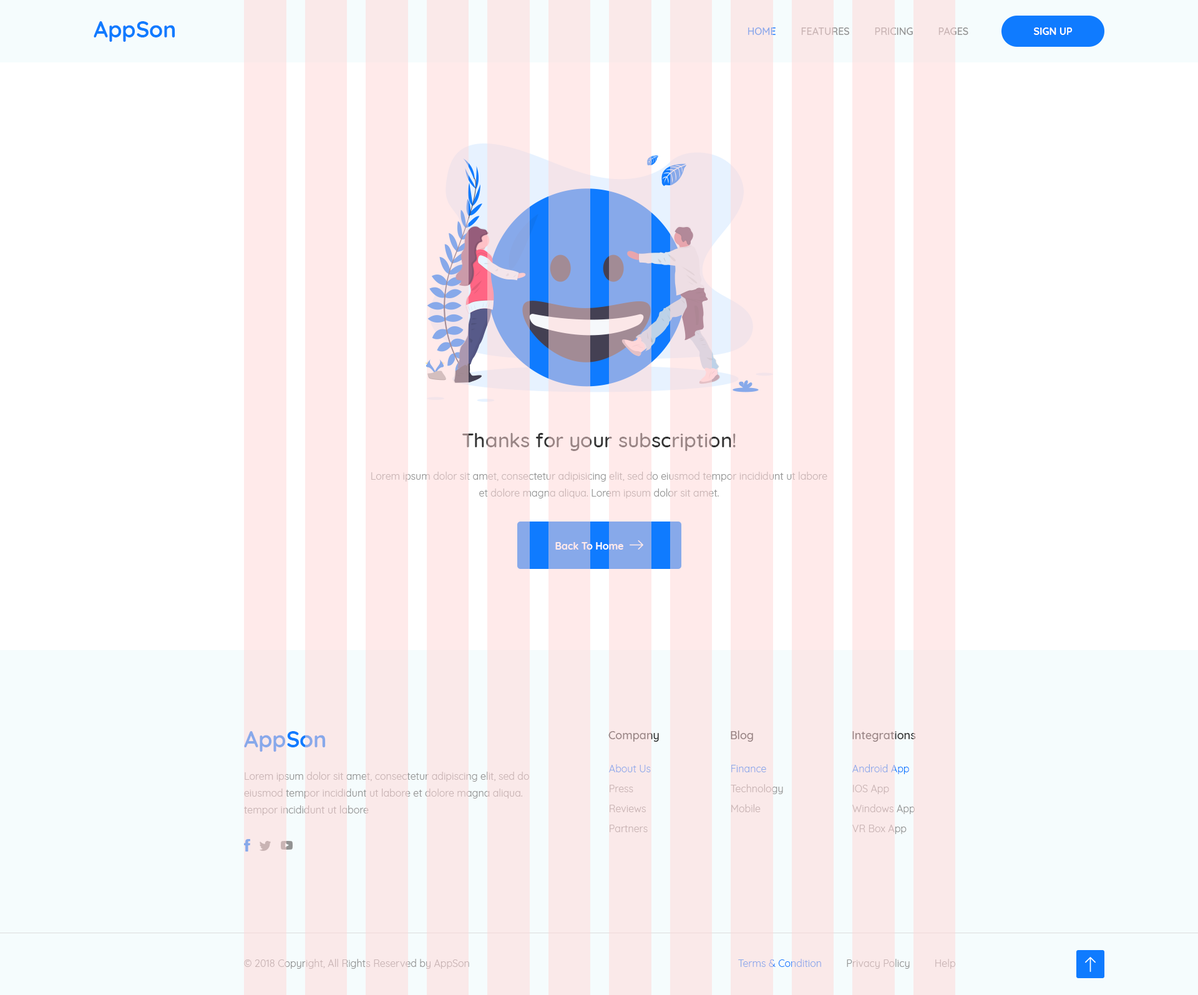
<style>
.page{position:relative;width:1198px;height:995px;background:#ffffff}
.page>*{position:absolute;margin:0}
.t1{font:22.5px "Quicksand-Bold";color:#0f7bff}
.t2{font:10px "Quicksand-Medium";text-transform:uppercase}
.t3{font:10px "Quicksand-Bold";color:#ffffff}
.t4{font:20px "Quicksand-Medium"}
.t5{font:10px/16.8px "Quicksand-Regular"}
.t6{font:22.5px "Quicksand-Bold";color:#87a9ea}
.t7{font:11.2px "Quicksand-Medium";color:#998585}
.t8{font:10px "Quicksand-Regular";color:#87a9ea}
.t9{font:10px "Quicksand-Regular"}
.t10{font:10px "Quicksand-Regular";color:#c9b4b4}
</style>
<div class="page">
<p class="t1" style="left:94px;top:21px;width:81px;height:21px">AppSon</p>
<p class="t2" style="left:748px;top:27px;width:220px;height:8px">Home         Features         Pricing         Pages</p>
<p class="t3" style="left:1034px;top:27px;width:39px;height:8px">SIGN UP</p>
<p class="t4" style="left:462px;top:433px;width:274px;height:18px">Thanks for your subscription!</p>
<p class="t5" style="left:371px;top:472px;width:456px;height:27px;text-align:center">Lorem ipsum dolor sit amet, consectetur adipisicing elit, sed do eiusmod tempor incididunt ut labore et dolore magna aliqua. Lorem ipsum dolor sit amet.</p>
<p class="t3" style="left:555px;top:542px;width:68px;height:8px">Back To Home</p>
<p class="t6" style="left:244px;top:731px;width:82px;height:21px">AppSon</p>
<p class="t7" style="left:608px;top:731px;width:51px;height:11px">Company</p>
<p class="t7" style="left:731px;top:731px;width:22px;height:11px">Blog</p>
<p class="t7" style="left:852px;top:731px;width:64px;height:11px">Integrations</p>
<p class="t5" style="left:244px;top:772px;width:285px;height:44px">Lorem ipsum dolor sit amet, consectetur adipiscing elit, sed do eiusmod tempor incididunt ut labore et dolore magna aliqua. tempor incididunt ut labore</p>
<p class="t8" style="left:609px;top:764px;width:42px;height:9px">About Us</p>
<p class="t8" style="left:731px;top:765px;width:35px;height:8px">Finance</p>
<p class="t9" style="left:852px;top:764px;width:57px;height:10px">Android App</p>
<p class="t10" style="left:610px;top:785px;width:23px;height:7px">Press</p>
<p class="t10" style="left:731px;top:784px;width:52px;height:10px">Technology</p>
<p class="t10" style="left:853px;top:785px;width:36px;height:9px">IOS App</p>
<p class="t10" style="left:610px;top:805px;width:36px;height:7px">Reviews</p>
<p class="t10" style="left:731px;top:804px;width:30px;height:8px">Mobile</p>
<p class="t9" style="left:852px;top:804px;width:63px;height:10px">Windows App</p>
<p class="t10" style="left:610px;top:825px;width:38px;height:7px">Partners</p>
<p class="t10" style="left:852px;top:825px;width:55px;height:9px">VR Box App</p>
<p class="t10" style="left:244px;top:959px;width:225px;height:10px">© 2018 Copyright, All Rights Reserved by AppSon</p>
<p class="t9" style="left:738px;top:959px;width:217px;height:10px">Terms &amp; Condition         Privacy Policy         Help</p>
</div>
